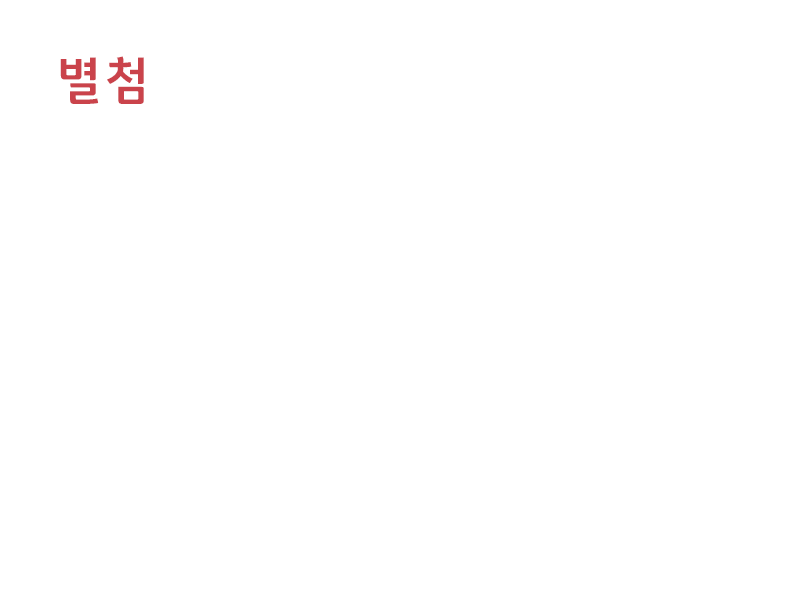
<style>
.page{position:relative;width:800px;height:600px;background:#ffffff}
.page>*{position:absolute;margin:0}
.t1{font:48px "BinggraeTaom-Bold";letter-spacing:0.05em;color:#ca434b}
</style>
<div class="page">
<p class="t1" style="left:60px;top:56px;width:84px;height:48px">별첨</p>
</div>
